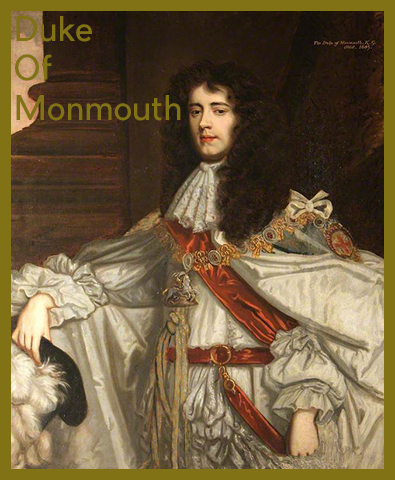
<style>
.page{position:relative;width:395px;height:480px}
.page>*{position:absolute;margin:0}
.t1{font:33.2px "PierSans";color:#807215;scale:0.96 1}
</style>
<div class="page">
<p class="t1" style="left:15px;top:16px;width:166px;height:105px">Duke<br>Of<br>Monmouth</p>
</div>
